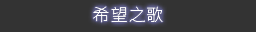
<style>
.page{position:relative;width:256px;height:32px;background:#333333}
.page>*{position:absolute;margin:0}
.t1{font:17px "NotoSansSC-Thin";letter-spacing:0.06em;color:#ffffff}
</style>
<div class="page">
<p class="t1" style="left:93px;top:6px;width:70px;height:17px">希望之歌</p>
</div>
